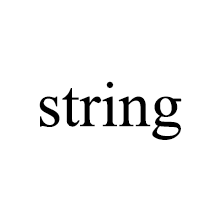
<style>
.page{position:relative;width:221px;height:221px;background:#ffffff}
.page>*{position:absolute;margin:0}
.t1{font:63.9px "TimesNewRomanPSMT";color:#000000}
</style>
<div class="page">
<p class="t1" style="left:39px;top:81px;width:143px;height:59px">string</p>
</div>
